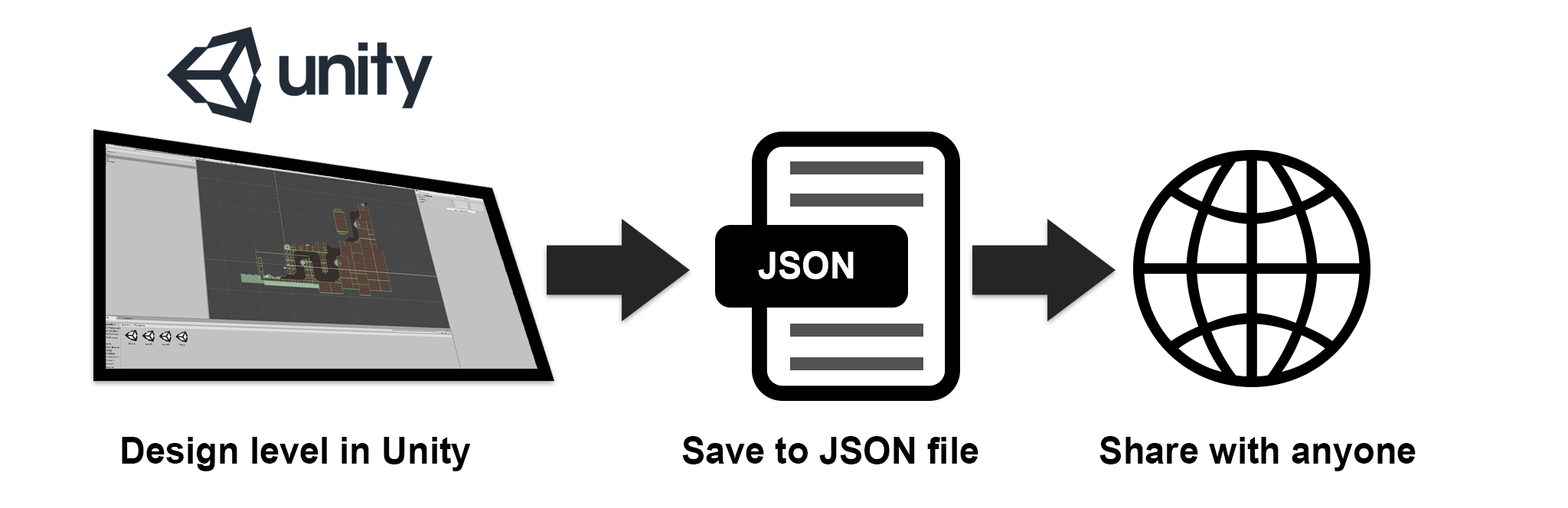
<style>
.page{position:relative;width:1568px;height:508px;background:#ffffff}
.page>*{position:absolute;margin:0}
.t1{font:36.8px "Arial-BoldMT";color:#ffffff}
.t2{font:36.8px "Arial-BoldMT";color:#010101}
</style>
<div class="page">
<p class="t1" style="left:758px;top:251px;width:96px;height:28px">JSON</p>
<p class="t2" style="left:122px;top:436px;width:1294px;height:36px">Design level in Unity                     Save to JSON file            Share with anyone</p>
</div>
